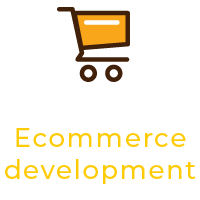
<style>
.page{position:relative;width:200px;height:200px;background:#ffffff}
.page>*{position:absolute;margin:0}
.t1{font:26px "Montserrat-Medium";letter-spacing:0.06em;color:#ffcb05}
</style>
<div class="page">
<p class="t1" style="left:5px;top:128px;width:191px;height:56px;text-align:center">Ecommerce<br>development</p>
</div>
